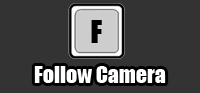
<style>
.page{position:relative;width:200px;height:93px;background:#333333}
.page>*{position:absolute;margin:0}
.t1{font:29.3px "Impact";color:#000000}
.t2{font:21.9px "Impact";color:#ffffff}
</style>
<div class="page">
<p class="t1" style="left:91px;top:20px;width:11px;height:23px">F</p>
<p class="t2" style="left:34px;top:66px;width:132px;height:17px">Follow Camera</p>
</div>
